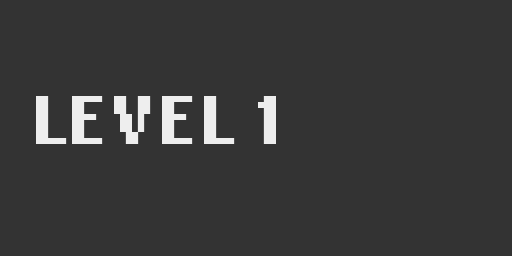
<style>
.page{position:relative;width:512px;height:256px;background:#333333}
.page>*{position:absolute;margin:0}
.t1{font:72px "LoRes12OT-Bold";color:#eeeeee}
</style>
<div class="page">
<p class="t1" style="left:36px;top:96px;width:240px;height:48px">LEVEL 1</p>
</div>
